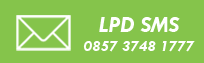
<style>
.page{position:relative;width:204px;height:63px;background:#85c44b}
.page>*{position:absolute;margin:0}
.t1{font:16px "TwCenMT-BoldItalic";color:#ffffff}
.t2{font:24px "TwCenMT-BoldItalic";color:#ffffff}
</style>
<div class="page">
<p class="t1" style="left:83px;top:17px;width:112px;height:35px;text-align:center"><span class="t2">LPD SMS<br></span>0857 3748 1777</p>
</div>
